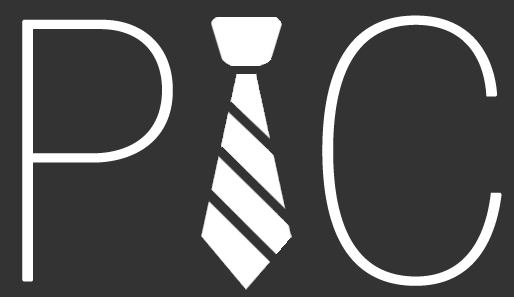
<style>
.page{position:relative;width:514px;height:297px;background:#333333}
.page>*{position:absolute;margin:0}
.t1{font:362.7px "HelveticaNeue-UltraLigCond";letter-spacing:0.275em;color:#ffffff;font-weight:bold;scale:1.11 1}
.t2{font:11.7px "HelveticaNeue-UltraLigCond";letter-spacing:0.275em;color:#ffffff;font-weight:bold;scale:1.11 1}
</style>
<div class="page">
<p class="t1" style="left:22px;top:15px;width:480px;height:271px"><span class="t2"> </span>PC</p>
</div>
